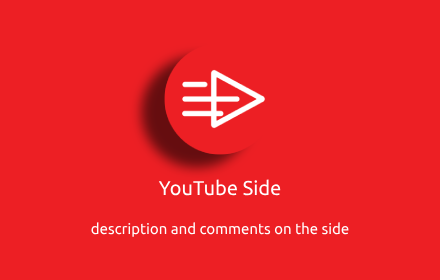
<style>
.page{position:relative;width:440px;height:280px;background:#ed1f24}
.page>*{position:absolute;margin:0}
.t1{font:20px "Ubuntu-Regular";color:#ffffff}
.t2{font:20px "Ubuntu-Regular";color:#ed1f24}
.t3{font:15px "Ubuntu-Regular";color:#ffffff}
</style>
<div class="page">
<p class="t1" style="left:158px;top:179px;width:123px;height:17px"><span class="t2">Y</span>ouTube Side</p>
<p class="t3" style="left:91px;top:222px;width:258px;height:15px">description and comments on the side</p>
</div>
